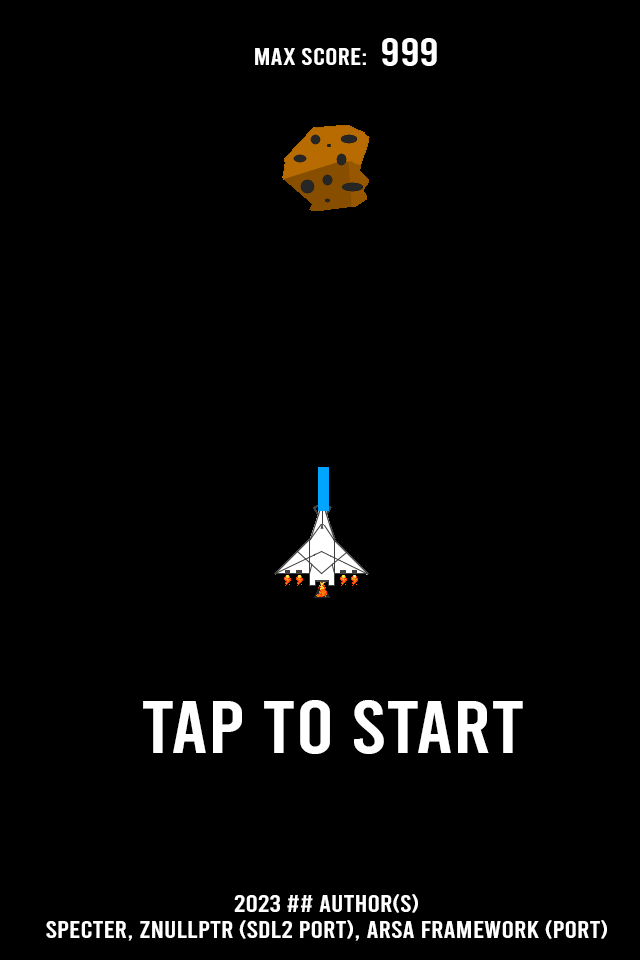
<style>
.page{position:relative;width:640px;height:960px;background:#000000}
.page>*{position:absolute;margin:0}
.t1{font:38.7px "Bebas-Regular";color:#ffffff;scale:1.17 1}
.t2{font:24.4px "Bebas-Regular";color:#ffffff;scale:1.17 1}
.t3{font:74.6px "Bebas-Regular";color:#ffffff;scale:1.17 1}
.t4{font:24.4px/26.1px "Bebas-Regular";color:#ffffff;scale:1.17 1}
</style>
<div class="page">
<p class="t1" style="left:382px;top:38px;width:55px;height:28px">999</p>
<p class="t2" style="left:255px;top:48px;width:111px;height:17px">max score:</p>
<p class="t3" style="left:143px;top:700px;width:380px;height:54px">TAP TO START</p>
<p class="t4" style="left:46px;top:894px;width:561px;height:47px;text-align:center">2023 ## Author(s)<br>Specter, znullptr (SDL2 port), arSA Framework (port)</p>
</div>
